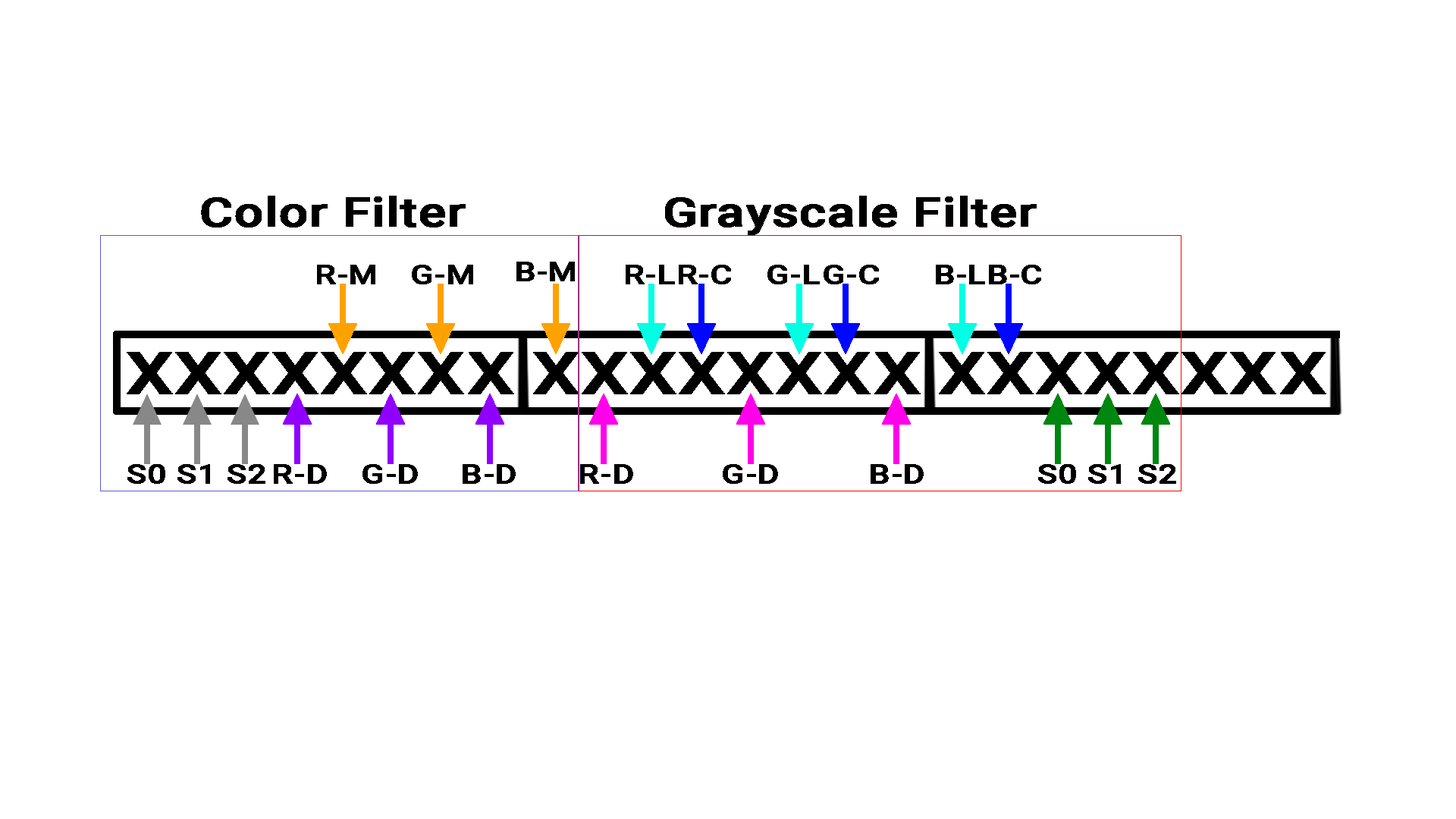
<style>
.page{position:relative;width:1456px;height:819px;background:#ffffff}
.page>*{position:absolute;margin:0}
.t1{font:40.1px "Roboto-Medium";color:#000000;font-weight:bold;scale:1.27 1}
.t2{font:26.5px "Roboto-Medium";color:#000000;font-weight:bold;scale:1.27 1}
</style>
<div class="page">
<p class="t1" style="left:201px;top:196px;width:265px;height:31px">Color Filter</p>
<p class="t1" style="left:665px;top:196px;width:372px;height:39px">Grayscale Filter</p>
<p class="t2" style="left:317px;top:265px;width:58px;height:19px">R-M</p>
<p class="t2" style="left:412px;top:265px;width:61px;height:19px">G-M</p>
<p class="t2" style="left:516px;top:262px;width:59px;height:19px">B-M</p>
<p class="t2" style="left:626px;top:265px;width:49px;height:19px">R-L</p>
<p class="t2" style="left:679px;top:265px;width:52px;height:19px">R-C</p>
<p class="t2" style="left:767px;top:265px;width:53px;height:19px">G-L</p>
<p class="t2" style="left:824px;top:265px;width:55px;height:19px">G-C</p>
<p class="t2" style="left:936px;top:265px;width:49px;height:19px">B-L</p>
<p class="t2" style="left:989px;top:265px;width:52px;height:19px">B-C</p>
<p class="t2" style="left:127px;top:464px;width:38px;height:20px">S0</p>
<p class="t2" style="left:177px;top:464px;width:33px;height:20px">S1</p>
<p class="t2" style="left:227px;top:464px;width:38px;height:20px">S2</p>
<p class="t2" style="left:274px;top:464px;width:53px;height:20px">R-D</p>
<p class="t2" style="left:362px;top:464px;width:56px;height:20px">G-D</p>
<p class="t2" style="left:463px;top:464px;width:53px;height:20px">B-D</p>
<p class="t2" style="left:580px;top:464px;width:53px;height:20px">R-D</p>
<p class="t2" style="left:723px;top:464px;width:55px;height:20px">G-D</p>
<p class="t2" style="left:871px;top:464px;width:53px;height:20px">B-D</p>
<p class="t2" style="left:1038px;top:464px;width:38px;height:20px">S0</p>
<p class="t2" style="left:1088px;top:464px;width:33px;height:20px">S1</p>
<p class="t2" style="left:1138px;top:464px;width:38px;height:20px">S2</p>
</div>
